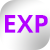
<style>
.page{position:relative;width:50px;height:50px}
.page>*{position:absolute;margin:0}
.t1{font:25px "OpenSans-Bold";color:#b400ff}
</style>
<div class="page">
<p class="t1" style="left:5px;top:15px;width:43px;height:18px">EXP</p>
</div>
